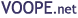
<style>
.page{position:relative;width:78px;height:18px;background:#ffffff}
.page>*{position:absolute;margin:0}
.t1{font:17px "TrebuchetMS";color:#3a3366}
.t2{font:13px "TrebuchetMS";color:#3a3366}
</style>
<div class="page">
<p class="t1" style="left:1px;top:1px;width:76px;height:13px">VOOPE<span class="t2">.net</span></p>
</div>
